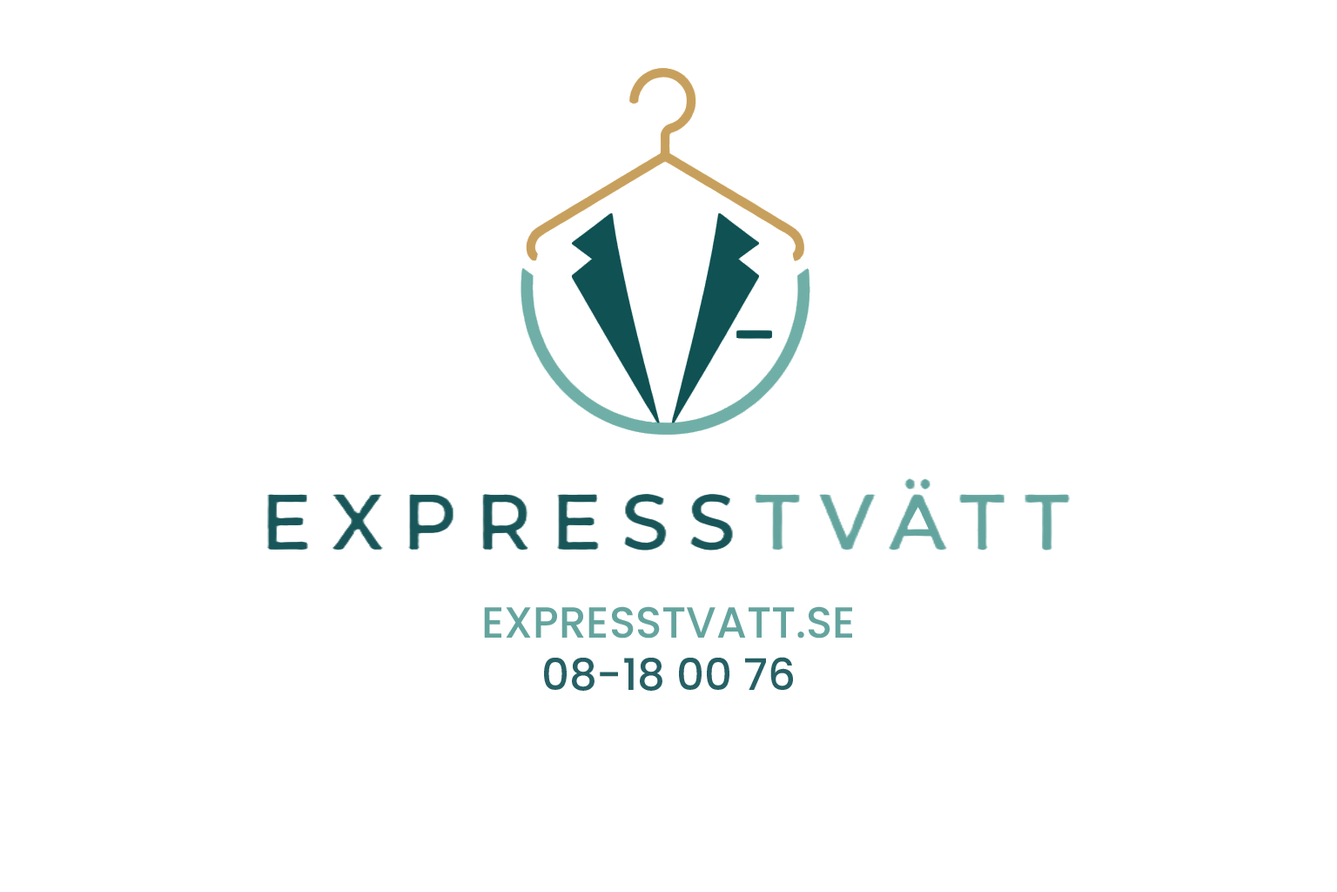
<style>
.page{position:relative;width:1337px;height:892px;background:#ffffff}
.page>*{position:absolute;margin:0}
.t1{font:43.5px "Poppins-Medium";color:#64a49e}
.t2{font:43.5px "Poppins-Medium";color:#266065}
</style>
<div class="page">
<p class="t1" style="left:484px;top:606px;width:368px;height:32px">EXPRESSTVATT.SE</p>
<p class="t2" style="left:544px;top:657px;width:249px;height:33px">08-18 00 76</p>
</div>
